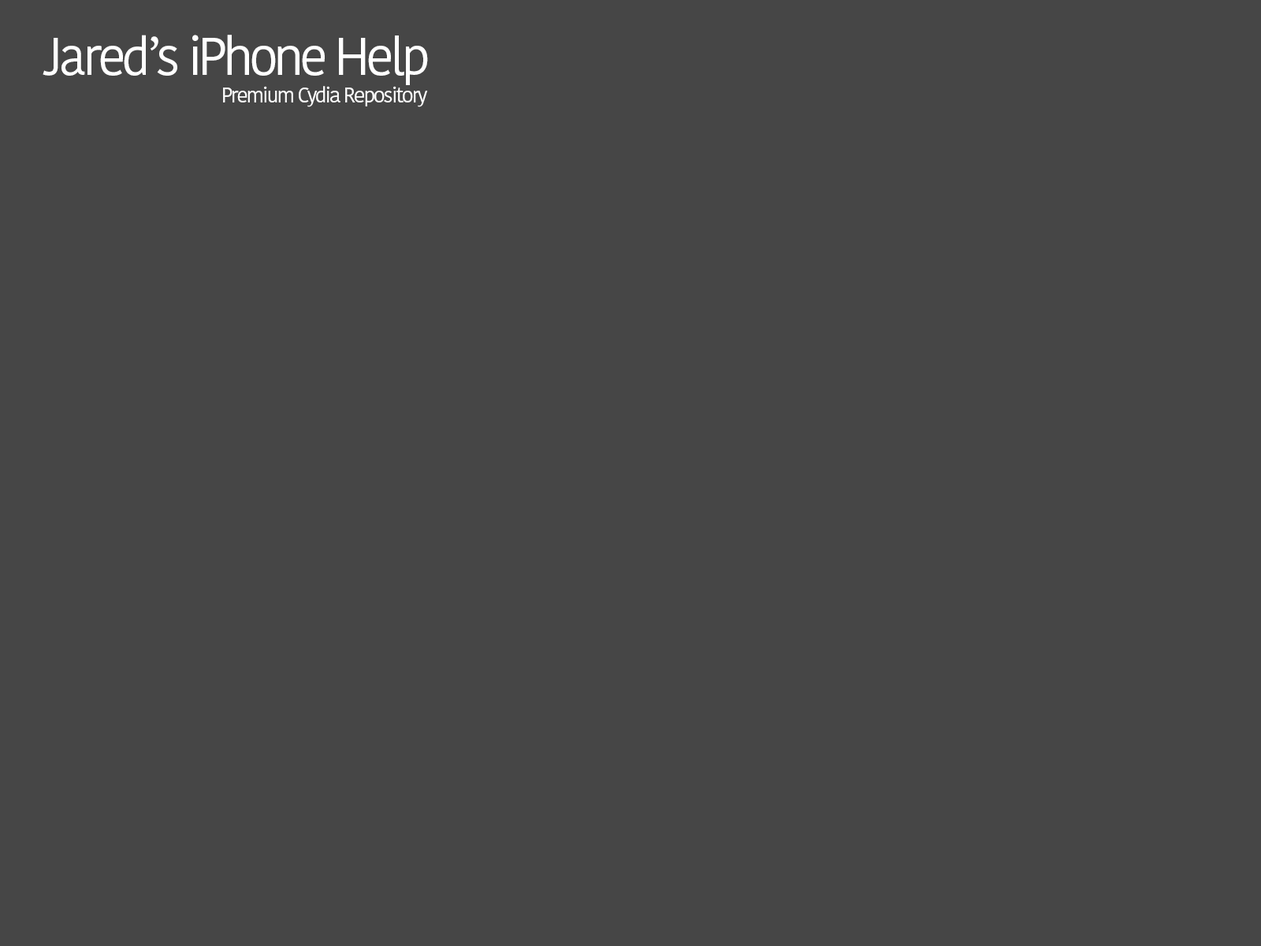
<style>
.page{position:relative;width:1261px;height:946px;background:#464646}
.page>*{position:absolute;margin:0}
.t1{font:52.6px "KohinoorBangla-Regular";letter-spacing:-0.08em;color:#ffffff}
.t2{font:21.2px "KohinoorBangla-Regular";letter-spacing:-0.08em;color:#ffffff}
</style>
<div class="page">
<p class="t1" style="left:43px;top:35px;width:385px;height:50px">Jared’s iPhone Help</p>
<p class="t2" style="left:223px;top:86px;width:205px;height:21px">Premium Cydia Repository</p>
</div>
